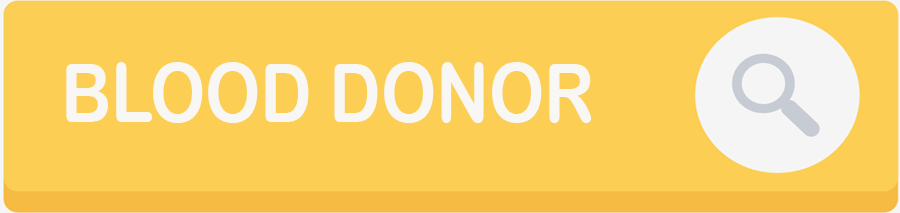
<style>
.page{position:relative;width:900px;height:213px;background:#fcce54}
.page>*{position:absolute;margin:0}
.t1{font:81.9px "ArialRoundedMTBold";color:#f9f7f4;scale:0.85 1}
</style>
<div class="page">
<p class="t1" style="left:66px;top:62px;width:526px;height:61px">BLOOD DONOR</p>
</div>
